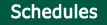
<style>
.page{position:relative;width:107px;height:25px;background:#005941}
.page>*{position:absolute;margin:0}
.t1{font:18px "Tahoma";letter-spacing:0.02em;color:#ffffff;font-weight:bold}
</style>
<div class="page">
<p class="t1" style="left:11px;top:4px;width:87px;height:15px">Schedules</p>
</div>
